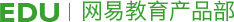
<style>
.page{position:relative;width:234px;height:22px;background:#ffffff}
.page>*{position:absolute;margin:0}
.t1{font:28px "GillSansMT-Bold";color:#39a030}
.t2{font:22px "HiraginoSansGB-W3";color:#39a030}
</style>
<div class="page">
<p class="t1" style="left:0px;top:3px;width:59px;height:19px">EDU</p>
<p class="t2" style="left:82px;top:0px;width:152px;height:22px">网易教育产品部</p>
</div>
